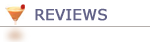
<style>
.page{position:relative;width:150px;height:42px;background:#ffffff}
.page>*{position:absolute;margin:0}
.t1{font:15px "Verdana";color:#636388;font-weight:bold}
</style>
<div class="page">
<p class="t1" style="left:35px;top:8px;width:72px;height:13px">REVIEWS</p>
</div>
